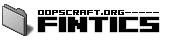
<style>
.page{position:relative;width:175px;height:40px;background:#ffffff}
.page>*{position:absolute;margin:0}
.t1{font:24px "04b09";color:#000000}
.t2{font:8px "04b09";color:#000000}
</style>
<div class="page">
<p class="t1" style="left:38px;top:17px;width:121px;height:15px">FINTICS</p>
<p class="t2" style="left:38px;top:10px;width:122px;height:5px">OOPSCRAFT.ORG-----</p>
</div>
